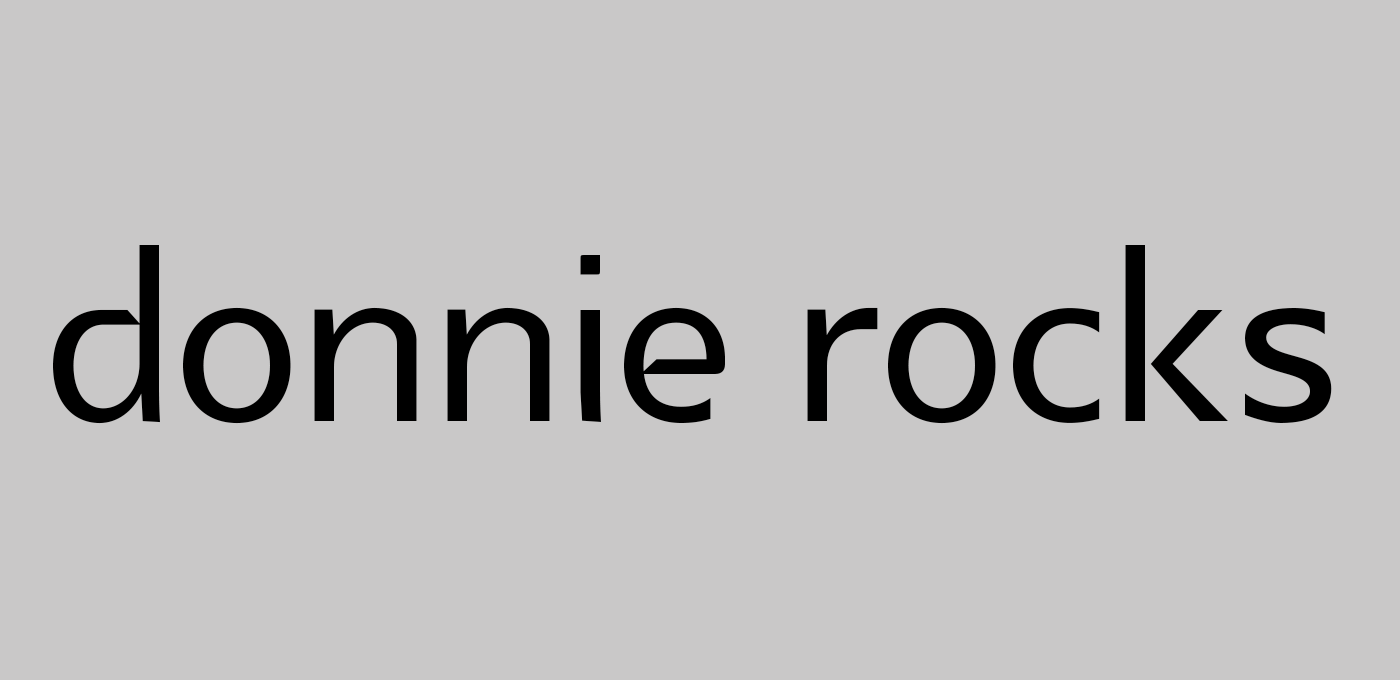
<style>
.page{position:relative;width:1400px;height:680px;background:#c9c8c8}
.page>*{position:absolute;margin:0}
.t1{font:325px "Glametrix";color:#000000}
</style>
<div class="page">
<p class="t1" style="left:53px;top:245px;width:1279px;height:179px">donnie rocks</p>
</div>
